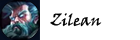
<style>
.page{position:relative;width:140px;height:40px;background:#ffffff}
.page>*{position:absolute;margin:0}
.t1{font:16px "VinerHandITC";color:#000000}
</style>
<div class="page">
<p class="t1" style="left:50px;top:13px;width:52px;height:14px">Zilean</p>
</div>
